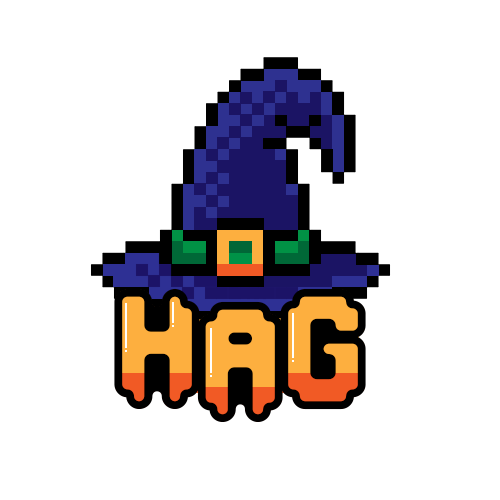
<style>
.page{position:relative;width:500px;height:500px;background:#ffffff}
.page>*{position:absolute;margin:0}
.t1{font:141px "CCOverbyteOff-Regular";color:#000000}
</style>
<div class="page">
<p class="t1" style="left:114px;top:288px;width:86px;height:121px">H</p>
<p class="t1" style="left:280px;top:288px;width:86px;height:122px">G</p>
<p class="t1" style="left:197px;top:301px;width:86px;height:121px">A</p>
</div>
